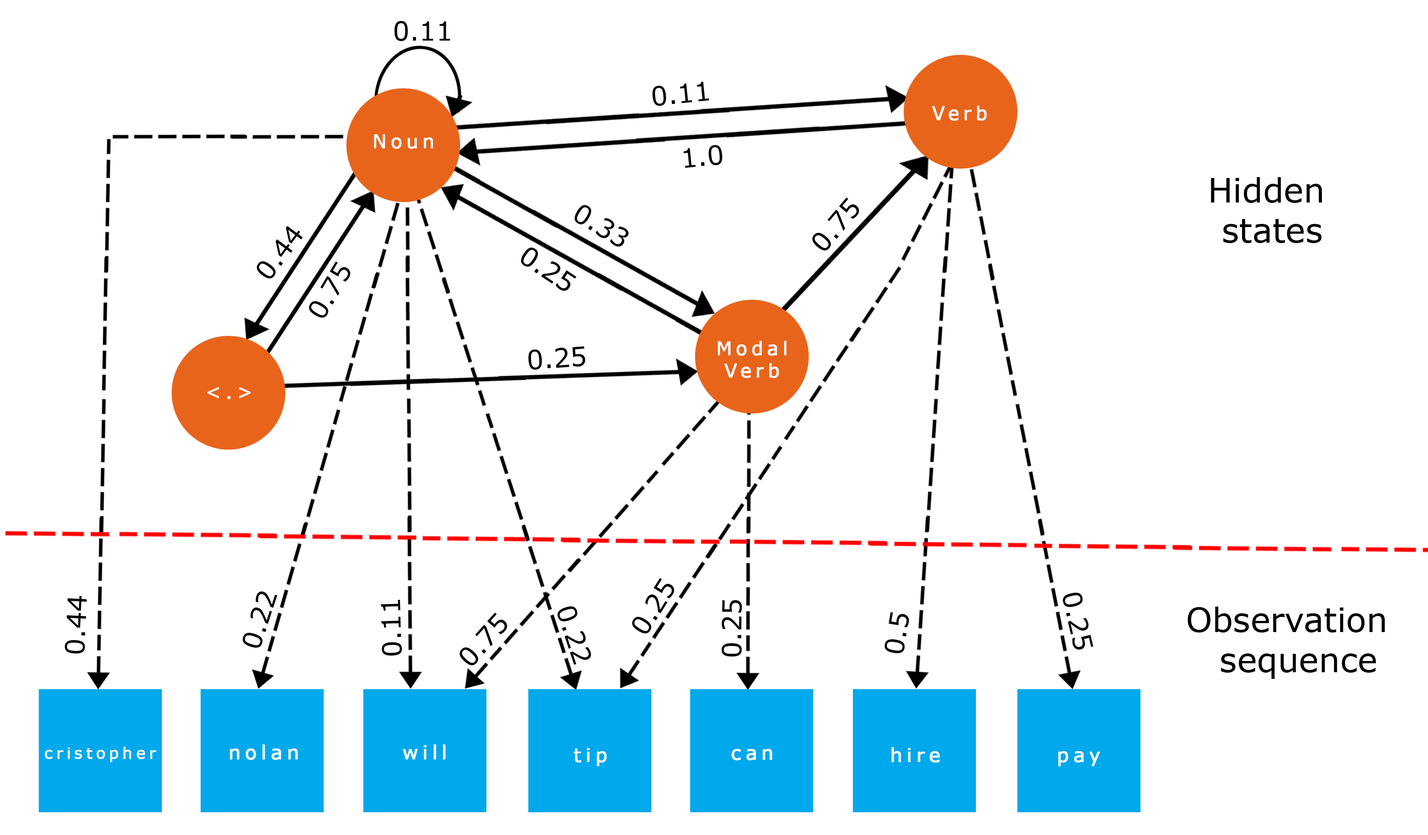
<style>
.page{position:relative;width:1428px;height:835px;background:#ffffff}
.page>*{position:absolute;margin:0}
.t1{font:26.4px "Verdana";color:#000000}
.t2{font:18.6px "Verdana";letter-spacing:0.2em;color:#ffffff;font-weight:bold}
.t3{font:33.4px "Verdana";color:#000000}
.t4{font:18.6px/0px "Verdana";letter-spacing:0.2em;color:#ffffff;font-weight:bold}
.t5{font:18.6px/22.3px "Verdana";letter-spacing:0.2em;color:#ffffff;font-weight:bold}
.t6{font:19.1px "Verdana";letter-spacing:0.2em;color:#ffffff;font-weight:bold}
.t7{font:15.7px "Verdana";letter-spacing:0.2em;color:#ffffff;font-weight:bold}
</style>
<div class="page">
<p class="t1" style="left:394px;top:21px;width:56px;height:20px">0.11</p>
<p class="t1" style="left:652px;top:82px;width:58px;height:24px;rotate:-6deg">0.11</p>
<p class="t2" style="left:932px;top:106px;width:55px;height:15px">Verb</p>
<p class="t2" style="left:374px;top:134px;width:59px;height:15px">Noun</p>
<p class="t1" style="left:684px;top:145px;width:38px;height:23px;rotate:-6deg">1.0</p>
<p class="t3" style="left:1211px;top:177px;width:111px;height:66px;text-align:center">Hidden<br> states</p>
<p class="t1" style="left:813px;top:198px;width:46px;height:53px;rotate:-50deg">0.75</p>
<p class="t1" style="left:575px;top:205px;width:54px;height:42px;rotate:31deg">0.33</p>
<p class="t1" style="left:257px;top:226px;width:46px;height:53px;rotate:-53deg">0.44</p>
<p class="t1" style="left:521px;top:248px;width:56px;height:43px;rotate:33deg">0.25</p>
<p class="t1" style="left:309px;top:261px;width:42px;height:57px;rotate:-59deg">0.75</p>
<p class="t4" style="left:718px;top:341px;width:69px;height:37px;text-align:center">Modal<span class="t5"><br>Verb</span></p>
<p class="t1" style="left:528px;top:346px;width:58px;height:24px;rotate:-4deg">0.25</p>
<p class="t6" style="left:207px;top:387px;width:44px;height:12px">&lt;.&gt;</p>
<p class="t1" style="left:632px;top:578px;width:42px;height:55px;rotate:-58deg">0.25</p>
<p class="t1" style="left:243px;top:591px;width:34px;height:57px;rotate:-72deg">0.22</p>
<p class="t1" style="left:1063px;top:592px;width:30px;height:58px;rotate:77deg">0.25</p>
<p class="t1" style="left:65px;top:596px;width:22px;height:57px;rotate:-87deg">0.44</p>
<p class="t1" style="left:381px;top:599px;width:21px;height:57px;rotate:-92deg">0.11</p>
<p class="t1" style="left:722px;top:600px;width:20px;height:56px;rotate:-90deg">0.25</p>
<p class="t1" style="left:460px;top:612px;width:47px;height:53px;rotate:-48deg">0.75</p>
<p class="t1" style="left:557px;top:606px;width:34px;height:59px;rotate:72deg">0.22</p>
<p class="t1" style="left:885px;top:612px;width:24px;height:41px;rotate:-81deg">0.5</p>
<p class="t3" style="left:1188px;top:606px;width:197px;height:73px;text-align:center">Observation <br> sequence</p>
<p class="t7" style="left:45px;top:747px;width:112px;height:15px">cristopher</p>
<p class="t6" style="left:230px;top:744px;width:68px;height:16px">nolan</p>
<p class="t6" style="left:403px;top:744px;width:43px;height:15px">will</p>
<p class="t6" style="left:574px;top:748px;width:33px;height:18px">tip</p>
<p class="t6" style="left:732px;top:749px;width:40px;height:11px">can</p>
<p class="t6" style="left:891px;top:747px;width:49px;height:16px">hire</p>
<p class="t6" style="left:1058px;top:751px;width:43px;height:15px">pay</p>
</div>
